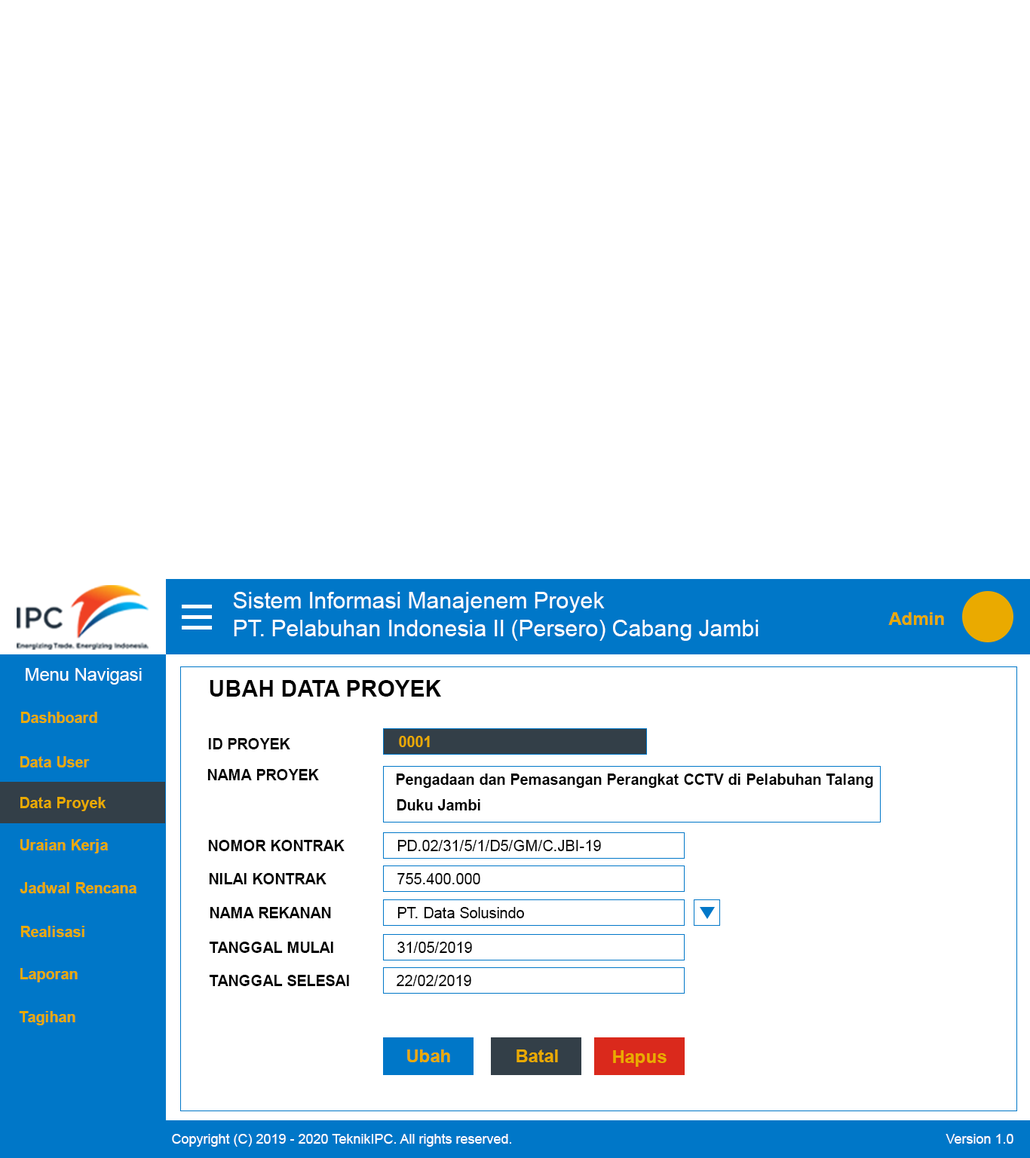
<style>
.page{position:relative;width:1030px;height:1158px;background:#ffffff}
.page>*{position:absolute;margin:0}
.t1{font:22.6px "ArialMT";color:#ffffff}
.t2{font:18.1px "Arial-BoldMT";color:#eaaa00}
.t3{font:18.1px "ArialMT";color:#ffffff}
.t4{font:22.6px "Arial-BoldMT";color:#000000}
.t5{font:15.1px "Arial-BoldMT";color:#eaaa00}
.t6{font:15.1px "Arial-BoldMT";color:#000000}
.t7{font:15.1px "ArialMT";color:#000000}
.t8{font:13.6px "ArialMT";color:#ffffff}
</style>
<div class="page">
<p class="t1" style="left:233px;top:592px;width:372px;height:21px">Sistem Informasi Manajenem Proyek</p>
<p class="t2" style="left:888px;top:612px;width:56px;height:13px">Admin</p>
<p class="t1" style="left:234px;top:620px;width:524px;height:21px">PT. Pelabuhan Indonesia II (Persero) Cabang Jambi</p>
<p class="t3" style="left:26px;top:668px;width:116px;height:17px">Menu Navigasi</p>
<p class="t4" style="left:210px;top:680px;width:231px;height:17px">UBAH DATA PROYEK</p>
<p class="t5" style="left:21px;top:712px;width:76px;height:11px">Dashboard</p>
<p class="t5" style="left:399px;top:736px;width:31px;height:11px">0001</p>
<p class="t6" style="left:208px;top:738px;width:82px;height:11px">ID PROYEK</p>
<p class="t5" style="left:20px;top:756px;width:70px;height:11px">Data User</p>
<p class="t6" style="left:207px;top:769px;width:112px;height:11px">NAMA PROYEK</p>
<p class="t6" style="left:397px;top:773px;width:476px;height:15px">Pengadaan dan Pemasangan Perangkat CCTV di Pelabuhan Talang</p>
<p class="t5" style="left:20px;top:797px;width:86px;height:14px">Data Proyek</p>
<p class="t6" style="left:397px;top:799px;width:83px;height:11px">Duku Jambi</p>
<p class="t5" style="left:20px;top:839px;width:88px;height:14px">Uraian Kerja</p>
<p class="t6" style="left:208px;top:840px;width:137px;height:11px">NOMOR KONTRAK</p>
<p class="t7" style="left:397px;top:840px;width:204px;height:11px">PD.02/31/5/1/D5/GM/C.JBI-19</p>
<p class="t6" style="left:209px;top:873px;width:117px;height:11px">NILAI KONTRAK</p>
<p class="t7" style="left:397px;top:873px;width:83px;height:11px">755.400.000</p>
<p class="t5" style="left:20px;top:882px;width:116px;height:11px">Jadwal Rencana</p>
<p class="t6" style="left:210px;top:907px;width:121px;height:11px">NAMA REKANAN</p>
<p class="t7" style="left:397px;top:907px;width:127px;height:11px">PT. Data Solusindo</p>
<p class="t5" style="left:21px;top:926px;width:63px;height:11px">Realisasi</p>
<p class="t6" style="left:209px;top:942px;width:124px;height:11px">TANGGAL MULAI</p>
<p class="t7" style="left:397px;top:942px;width:75px;height:11px">31/05/2019</p>
<p class="t5" style="left:20px;top:968px;width:58px;height:14px">Laporan</p>
<p class="t6" style="left:209px;top:975px;width:140px;height:11px">TANGGAL SELESAI</p>
<p class="t7" style="left:397px;top:975px;width:74px;height:11px">22/02/2019</p>
<p class="t5" style="left:19px;top:1011px;width:56px;height:14px">Tagihan</p>
<p class="t2" style="left:407px;top:1049px;width:43px;height:13px">Ubah</p>
<p class="t2" style="left:516px;top:1049px;width:42px;height:13px">Batal</p>
<p class="t2" style="left:613px;top:1050px;width:53px;height:17px">Hapus</p>
<p class="t8" style="left:172px;top:1134px;width:339px;height:13px">Copyright (C) 2019 - 2020 TeknikIPC. All rights reserved.</p>
<p class="t8" style="left:945px;top:1134px;width:68px;height:10px">Version 1.0</p>
</div>
